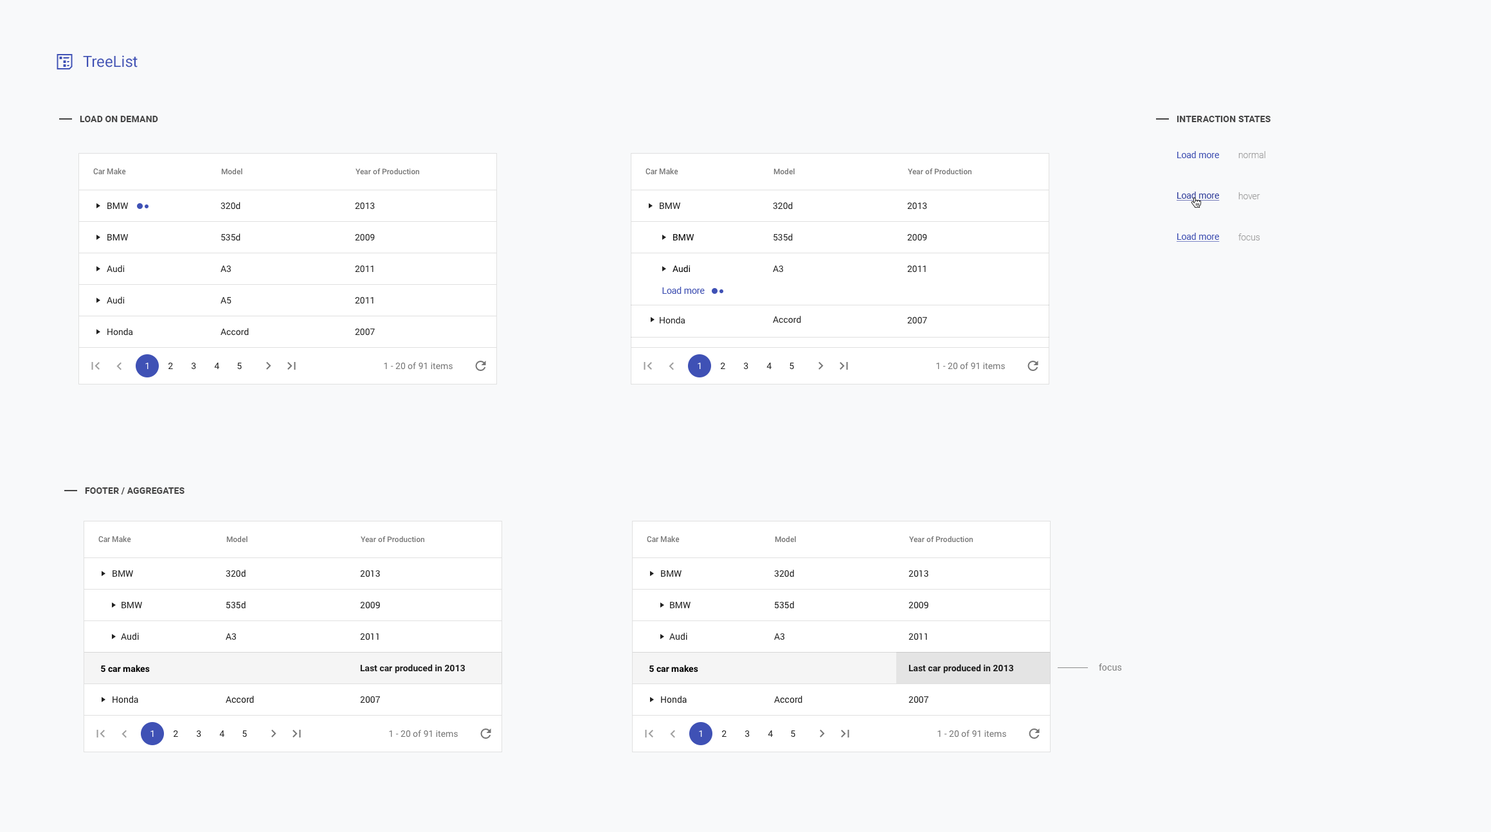
<style>
.page{position:relative;width:1491px;height:832px;background:#f8f9fa}
.page>*{position:absolute;margin:0}
.t1{font:15.4px "Roboto-Regular";color:#3f51b5}
.t2{font:9px "Roboto-Bold";letter-spacing:0.01em;color:#454545;text-transform:uppercase}
.t3{font:9px "Roboto-Regular";color:#3f51b5}
.t4{font:9px/41.1px "Roboto-Light";color:#a1a1a1}
.t5{font:7.7px "Roboto-Medium";color:#757575}
.t6{font:9px "Roboto-Regular";color:#303f9f;text-decoration:underline}
.t7{font:9px/31.5px "Roboto-Regular";color:#212121}
.t8{font:9px/114.4px "Roboto-Regular";color:#212121}
.t9{font:9px/19.3px "Roboto-Regular";color:#212121}
.t10{font:9px/19.9px "Roboto-Regular";color:#212121}
.t11{font:9px "Roboto-Regular";color:#3f51b5;text-decoration:underline}
.t12{font:9px/31.5px "Roboto-Regular";color:#000000}
.t13{font:9px "Roboto-Regular";color:#ffffff}
.t14{font:9px "Roboto-Regular";color:#212121}
.t15{font:9px "Roboto-Regular";color:#757575}
.t16{font:9px/31.5px "Roboto-Bold";color:#202020}
.t17{font:9px/31.5px "Roboto-Regular";color:#202020}
.t18{font:9px/31.5px "Roboto-Bold";color:#1e1e1e}
.t19{font:9px/31.5px "Roboto-Regular";color:#1e1e1e}
.t20{font:9px "Roboto-Bold";color:#000000}
.t21{font:9px "Roboto-Regular";letter-spacing:0.01em;color:#7e7e7e}
</style>
<div class="page">
<p class="t1" style="left:83px;top:55px;width:55px;height:13px">TreeList</p>
<p class="t2" style="left:80px;top:116px;width:78px;height:6px">load on demand</p>
<p class="t2" style="left:1176px;top:116px;width:94px;height:6px">interaction states</p>
<p class="t3" style="left:1177px;top:151px;width:42px;height:7px">Load more</p>
<p class="t4" style="left:1238px;top:151px;width:27px;height:89px">normal<br>hover<br>focus</p>
<p class="t5" style="left:93px;top:168px;width:33px;height:7px">Car Make</p>
<p class="t5" style="left:221px;top:168px;width:21px;height:7px">Model</p>
<p class="t5" style="left:356px;top:168px;width:63px;height:7px">Year of Production</p>
<p class="t5" style="left:645px;top:168px;width:33px;height:7px">Car Make</p>
<p class="t5" style="left:773px;top:168px;width:22px;height:7px">Model</p>
<p class="t5" style="left:908px;top:168px;width:63px;height:7px">Year of Production</p>
<p class="t6" style="left:1176px;top:192px;width:44px;height:9px">Load more</p>
<p class="t7" style="left:107px;top:203px;width:26px;height:133px">BMW<br>BMW<br>Audi<br>Audi<br>Honda</p>
<p class="t7" style="left:221px;top:202px;width:28px;height:134px">320d<br>535d<br>A3<br>A5<br>Accord</p>
<p class="t7" style="left:355px;top:202px;width:20px;height:134px">2013<br>2009<br>2011<br>2011<br>2007</p>
<p class="t8" style="left:660px;top:203px;width:25px;height:121px"><span class="t7">BMW<br></span>Honda</p>
<p class="t7" style="left:773px;top:202px;width:28px;height:121px">320d<br>535d<br>A3<br><br><span class="t9">Accord</span></p>
<p class="t7" style="left:907px;top:202px;width:20px;height:122px">2013<br>2009<br>2011<br><br><span class="t10">2007</span></p>
<p class="t11" style="left:1176px;top:233px;width:44px;height:9px">Load more</p>
<p class="t12" style="left:672px;top:234px;width:22px;height:39px">BMW<br>Audi</p>
<p class="t3" style="left:662px;top:287px;width:43px;height:7px">Load more</p>
<p class="t13" style="left:145px;top:363px;width:3px;height:6px">1</p>
<p class="t14" style="left:168px;top:363px;width:5px;height:6px">2</p>
<p class="t14" style="left:192px;top:363px;width:4px;height:7px">3</p>
<p class="t14" style="left:214px;top:363px;width:5px;height:6px">4</p>
<p class="t14" style="left:237px;top:363px;width:5px;height:7px">5</p>
<p class="t15" style="left:384px;top:362px;width:69px;height:8px">1 - 20 of 91 items</p>
<p class="t13" style="left:698px;top:363px;width:3px;height:6px">1</p>
<p class="t14" style="left:721px;top:363px;width:4px;height:6px">2</p>
<p class="t14" style="left:744px;top:363px;width:4px;height:7px">3</p>
<p class="t14" style="left:766px;top:363px;width:5px;height:6px">4</p>
<p class="t14" style="left:789px;top:363px;width:5px;height:7px">5</p>
<p class="t15" style="left:936px;top:362px;width:69px;height:8px">1 - 20 of 91 items</p>
<p class="t2" style="left:85px;top:487px;width:99px;height:7px">footer / aggregates</p>
<p class="t5" style="left:98px;top:536px;width:33px;height:7px">Car Make</p>
<p class="t5" style="left:226px;top:536px;width:22px;height:7px">Model</p>
<p class="t5" style="left:361px;top:536px;width:63px;height:7px">Year of Production</p>
<p class="t5" style="left:647px;top:536px;width:33px;height:7px">Car Make</p>
<p class="t5" style="left:775px;top:536px;width:21px;height:7px">Model</p>
<p class="t5" style="left:909px;top:536px;width:64px;height:7px">Year of Production</p>
<p class="t7" style="left:226px;top:570px;width:28px;height:133px">320d<br>535d<br>A3<br><br>Accord</p>
<p class="t7" style="left:774px;top:570px;width:28px;height:133px">320d<br>535d<br>A3<br><br>Accord</p>
<p class="t7" style="left:113px;top:570px;width:29px;height:133px">BMW<br>    BMW<br>    Audi<br><br>Honda</p>
<p class="t16" style="left:360px;top:570px;width:105px;height:133px"><span class="t17">2013<br>2009<br>2011<br></span>Last car produced in 2013<br><span class="t17">2007</span></p>
<p class="t7" style="left:661px;top:570px;width:29px;height:133px">BMW<br>    BMW<br>    Audi<br><br>Honda</p>
<p class="t18" style="left:908px;top:570px;width:105px;height:133px"><span class="t19">2013<br>2009<br>2011<br></span>Last car produced in 2013<br><span class="t19">2007</span></p>
<p class="t20" style="left:101px;top:665px;width:49px;height:7px">5 car makes</p>
<p class="t20" style="left:649px;top:665px;width:49px;height:7px">5 car makes</p>
<p class="t21" style="left:1099px;top:663px;width:23px;height:7px">focus</p>
<p class="t13" style="left:150px;top:730px;width:4px;height:7px">1</p>
<p class="t14" style="left:174px;top:730px;width:4px;height:7px">2</p>
<p class="t14" style="left:197px;top:730px;width:4px;height:7px">3</p>
<p class="t14" style="left:219px;top:730px;width:5px;height:7px">4</p>
<p class="t14" style="left:242px;top:730px;width:5px;height:7px">5</p>
<p class="t15" style="left:389px;top:730px;width:69px;height:7px">1 - 20 of 91 items</p>
<p class="t13" style="left:699px;top:730px;width:3px;height:7px">1</p>
<p class="t14" style="left:722px;top:730px;width:4px;height:7px">2</p>
<p class="t14" style="left:745px;top:730px;width:5px;height:7px">3</p>
<p class="t14" style="left:768px;top:730px;width:5px;height:7px">4</p>
<p class="t14" style="left:791px;top:730px;width:4px;height:7px">5</p>
<p class="t15" style="left:937px;top:730px;width:69px;height:7px">1 - 20 of 91 items</p>
</div>
